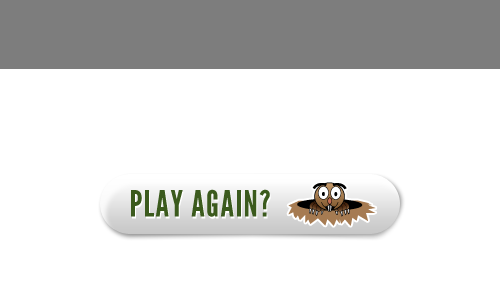
<style>
.page{position:relative;width:500px;height:300px;background:#ffffff}
.page>*{position:absolute;margin:0}
.t1{font:36px "LeagueGothic";letter-spacing:0.04em;color:#3b5a1d;text-transform:uppercase}
</style>
<div class="page">
<p class="t1" style="left:131px;top:189px;width:139px;height:28px">Play Again?</p>
</div>
